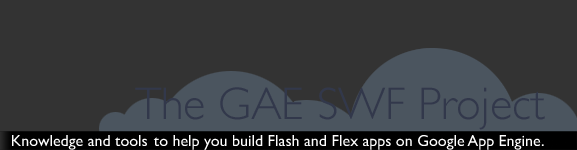
<style>
.page{position:relative;width:577px;height:150px;background:#333333}
.page>*{position:absolute;margin:0}
.t1{font:45.8px "GillSans-Light";color:#32384b}
.t2{font:16px "GillSans";color:#ffffff}
</style>
<div class="page">
<p class="t1" style="left:135px;top:87px;width:410px;height:43px">The GAE SWF Project</p>
<p class="t2" style="left:12px;top:135px;width:532px;height:15px">Knowledge and tools to help you build Flash and Flex apps on Google App Engine.</p>
</div>
